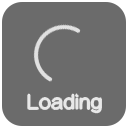
<style>
.page{position:relative;width:128px;height:128px;background:#6b6b6b}
.page>*{position:absolute;margin:0}
.t1{font:18px "FZLTCXHJW--GB1-0";color:#ffffff;font-weight:bold}
</style>
<div class="page">
<p class="t1" style="left:28px;top:94px;width:73px;height:19px;opacity:0.8">Loading</p>
</div>
